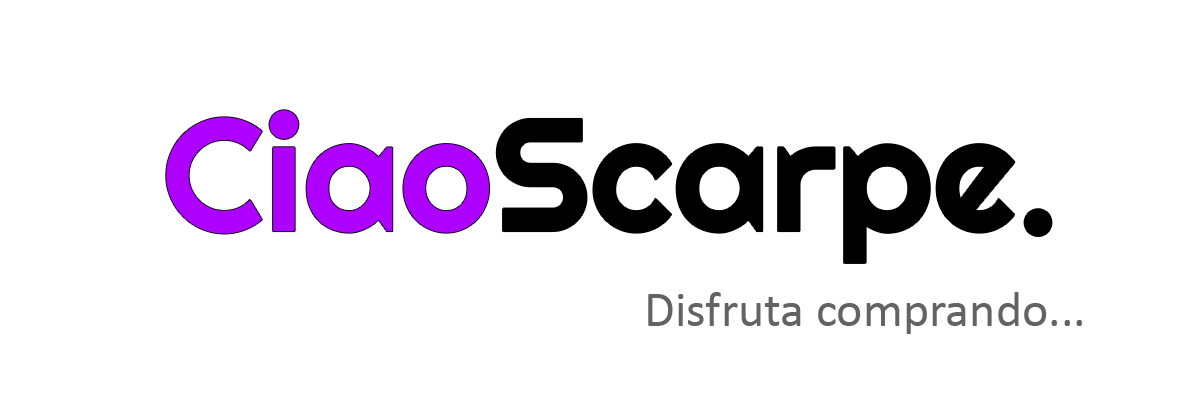
<style>
.page{position:relative;width:1200px;height:400px;background:#ffffff}
.page>*{position:absolute;margin:0}
.t1{font:160px "Righteous-Regular";color:#000000}
.t2{font:160px "Righteous-Regular";color:#ae00ff}
.t3{font:50px "Calibri";color:#636363}
</style>
<div class="page">
<p class="t1" style="left:166px;top:110px;width:886px;height:153px"><span class="t2">Ciao</span>Scarpe.</p>
<p class="t3" style="left:648px;top:292px;width:434px;height:42px">Disfruta comprando...</p>
</div>
